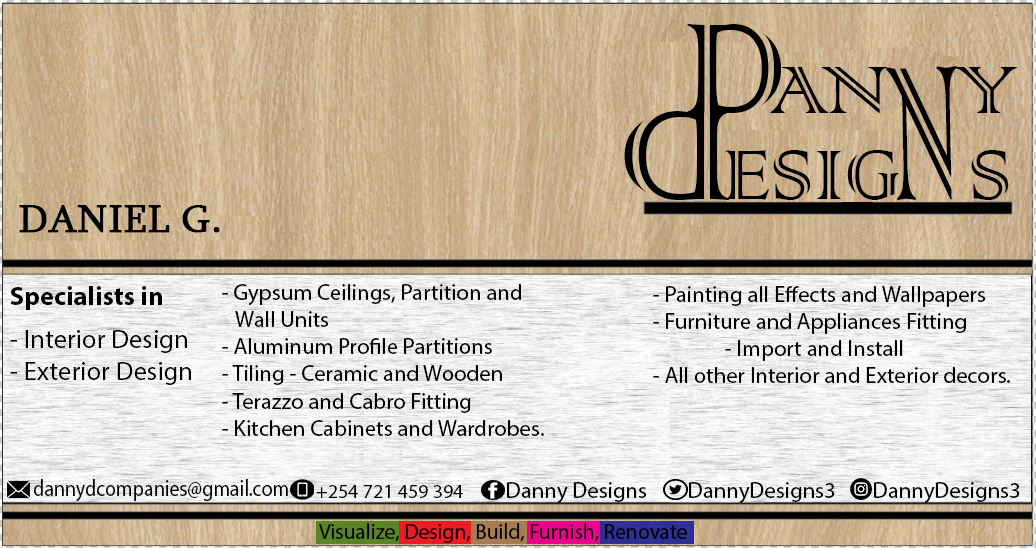
<style>
.page{position:relative;width:1036px;height:548px}
.page>*{position:absolute;margin:0}
.t1{font:168.7px "ColonnaMT";color:#000000;scale:0.92 1}
.t2{font:88.9px "ColonnaMT";color:#000000}
.t3{font:252.9px "ColonnaMT";color:#000000;scale:0.38 1}
.t4{font:168.7px "ColonnaMT";color:#000000}
.t5{font:93.3px "ColonnaMT";color:#000000}
.t6{font:40px "Sylfaen";color:#000000;font-weight:bold}
.t7{font:26.7px "MyriadPro-Regular";color:#000000}
.t8{font:26.7px "MyriadPro-Bold";color:#000000}
.t9{font:22.7px "MyriadPro-Regular";color:#000000}
.t10{font:23px "MyriadPro-Regular";color:#000000;scale:0.87 1}
.t11{font:20px "MyriadPro-Regular";color:#000000}
.t12{font:21.3px "MyriadPro-Regular";color:#000000}
</style>
<div class="page">
<p class="t1" style="left:687px;top:24px;width:95px;height:89px">D</p>
<p class="t2" style="left:770px;top:67px;width:247px;height:46px">AN   Y</p>
<p class="t3" style="left:886px;top:66px;width:71px;height:135px;rotate:-1deg">N</p>
<p class="t4" style="left:624px;top:111px;width:105px;height:89px;rotate:180deg">D</p>
<p class="t5" style="left:725px;top:150px;width:284px;height:50px">ESIG   S</p>
<p class="t6" style="left:19px;top:205px;width:201px;height:28px">DANIEL G.</p>
<p class="t7" style="left:10px;top:286px;width:181px;height:99px;text-align:justify"><span class="t8">Specialists in <br><br></span>- Interior Design<br>- Exterior Design</p>
<p class="t9" style="left:222px;top:284px;width:322px;height:152px;text-align:justify">- Gypsum Ceilings, Partition and<br>   Wall Units<br>- Aluminum Profile Partitions<br>- Tiling - Ceramic and Wooden<br>- Terazzo and Cabro Fitting<br>- Kitchen Cabinets and Wardrobes.</p>
<p class="t9" style="left:653px;top:286px;width:357px;height:97px;text-align:justify">- Painting all Effects and Wallpapers<br>- Furniture and Appliances Fitting<br>  - Import and Install<br>- All other Interior and Exterior decors.</p>
<p class="t10" style="left:34px;top:479px;width:254px;height:23px">dannydcompanies@gmail.com</p>
<p class="t11" style="left:316px;top:485px;width:147px;height:13px">+254 721 459 394</p>
<p class="t9" style="left:507px;top:482px;width:140px;height:22px">Danny Designs</p>
<p class="t9" style="left:689px;top:482px;width:146px;height:22px">DannyDesigns3</p>
<p class="t9" style="left:874px;top:482px;width:146px;height:22px">DannyDesigns3</p>
<p class="t12" style="left:319px;top:523px;width:368px;height:20px">Visualize, Design, Build, Furnish, Renovate</p>
</div>
